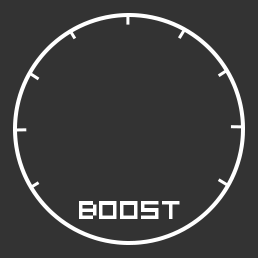
<style>
.page{position:relative;width:258px;height:258px;background:#333333}
.page>*{position:absolute;margin:0}
.t1{font:34.7px "VisitorTT1BRK";color:#ffffff}
</style>
<div class="page">
<p class="t1" style="left:79px;top:201px;width:101px;height:18px">BOOST</p>
</div>
